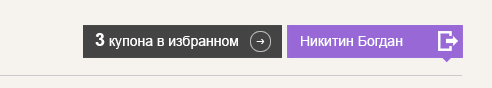
<style>
.page{position:relative;width:492px;height:88px;background:#f6f2ed}
.page>*{position:absolute;margin:0}
.t1{font:14px "ArialMT";color:#ffffff}
.t2{font:18px "Arial-BoldMT";color:#ffffff}
</style>
<div class="page">
<p class="t1" style="left:95px;top:33px;width:143px;height:16px"><span class="t2">3</span> купона в избранном</p>
<p class="t1" style="left:301px;top:36px;width:102px;height:12px">Никитин Богдан</p>
</div>
